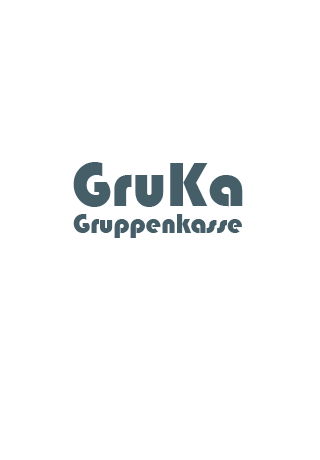
<style>
.page{position:relative;width:320px;height:460px;background:#ffffff}
.page>*{position:absolute;margin:0}
.t1{font:64px "Bauhaus93";color:#455e68}
.t2{font:27.6px "Bauhaus93";color:#455e68}
</style>
<div class="page">
<p class="t1" style="left:73px;top:162px;width:170px;height:45px">GruKa</p>
<p class="t2" style="left:73px;top:214px;width:169px;height:24px">Gruppenkasse</p>
</div>
